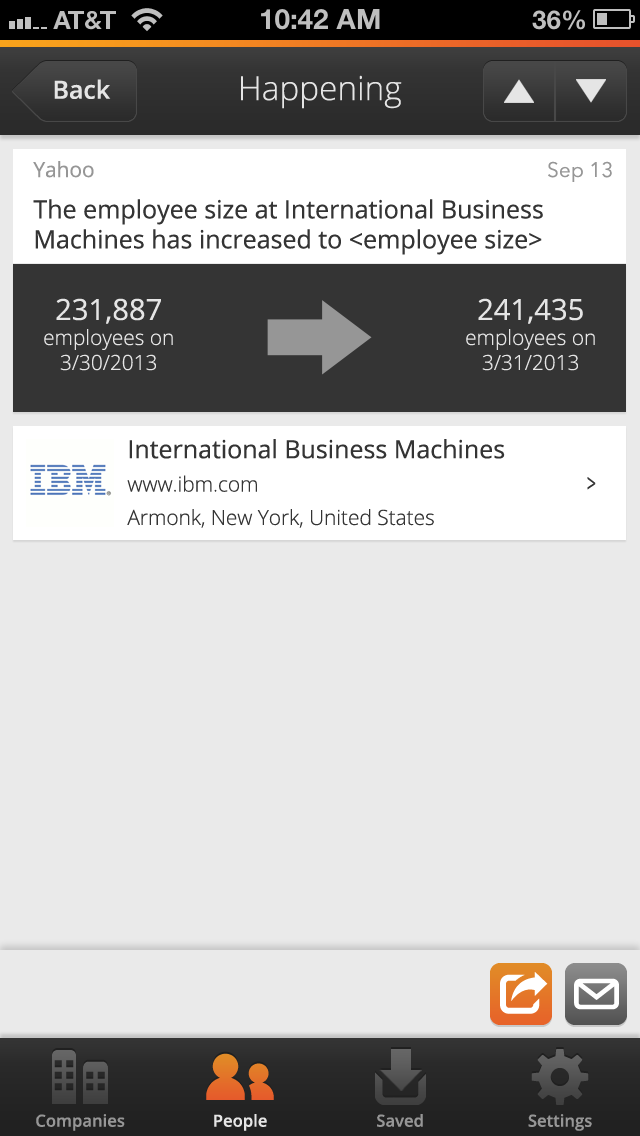
<style>
.page{position:relative;width:640px;height:1136px;background:#eaeaea}
.page>*{position:absolute;margin:0}
.t1{font:33.3px "OpenSans-Light";color:#e5e5e5}
.t2{font:25px "OpenSans-Semibold";color:#e5e5e5}
.t3{font:25px "OpenSans";color:#343434}
.t4{font:20.8px "OpenSans";color:#969696}
.t5{font:20.8px "AvenirNext-Regular";color:#969696}
.t6{font:20.8px "OpenSans-Light";color:#e5e5e5}
.t7{font:29.2px "OpenSans";color:#e5e5e5}
.t8{font:20.8px "OpenSans-Light";color:#343434}
.t9{font:25px "OpenSans";color:#343434;scale:0.64 1}
.t10{font:16.7px "OpenSans-Semibold";color:#969696}
.t11{font:16.7px "OpenSans-Semibold";color:#e5e5e5}
</style>
<div class="page">
<p class="t1" style="left:241px;top:75px;width:161px;height:34px">Happening</p>
<p class="t2" style="left:54px;top:79px;width:57px;height:20px">Back</p>
<p class="t3" style="left:33px;top:161px;width:510px;height:94px"><span class="t4">Yahoo<br></span>The employee size at International Business Machines has increased to &lt;employee size&gt;</p>
<p class="t5" style="left:548px;top:161px;width:64px;height:21px">Sep 13</p>
<p class="t6" style="left:44px;top:298px;width:129px;height:73px;text-align:center"><span class="t7">231,887<br></span>employees on<br>3/30/2013</p>
<p class="t6" style="left:466px;top:298px;width:129px;height:73px;text-align:center"><span class="t7">241,435<br></span>employees on<br>3/31/2013</p>
<p class="t8" style="left:127px;top:439px;width:378px;height:89px"><span class="t3">International Business Machines<br></span>www.ibm.com<br>Armonk, New York, United States</p>
<p class="t9" style="left:587px;top:477px;width:9px;height:13px">&gt;</p>
<p class="t10" style="left:36px;top:1114px;width:89px;height:17px">Companies</p>
<p class="t11" style="left:214px;top:1114px;width:53px;height:17px">People</p>
<p class="t10" style="left:377px;top:1114px;width:46px;height:13px">Saved</p>
<p class="t10" style="left:528px;top:1114px;width:64px;height:17px">Settings</p>
</div>
